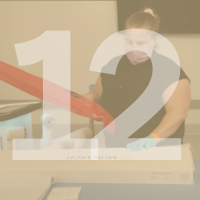
<style>
.page{position:relative;width:200px;height:200px}
.page>*{position:absolute;margin:0}
.t1{font:187.5px "PostGrotesk-Bold";color:#e2d7c5}
.t2{font:187.5px "PostGrotesk-Bold";color:#d3cbb9}
</style>
<div class="page">
<p class="t1" style="left:12px;top:30px;width:87px;height:130px">1</p>
<p class="t2" style="left:89px;top:28px;width:93px;height:132px">2</p>
</div>
